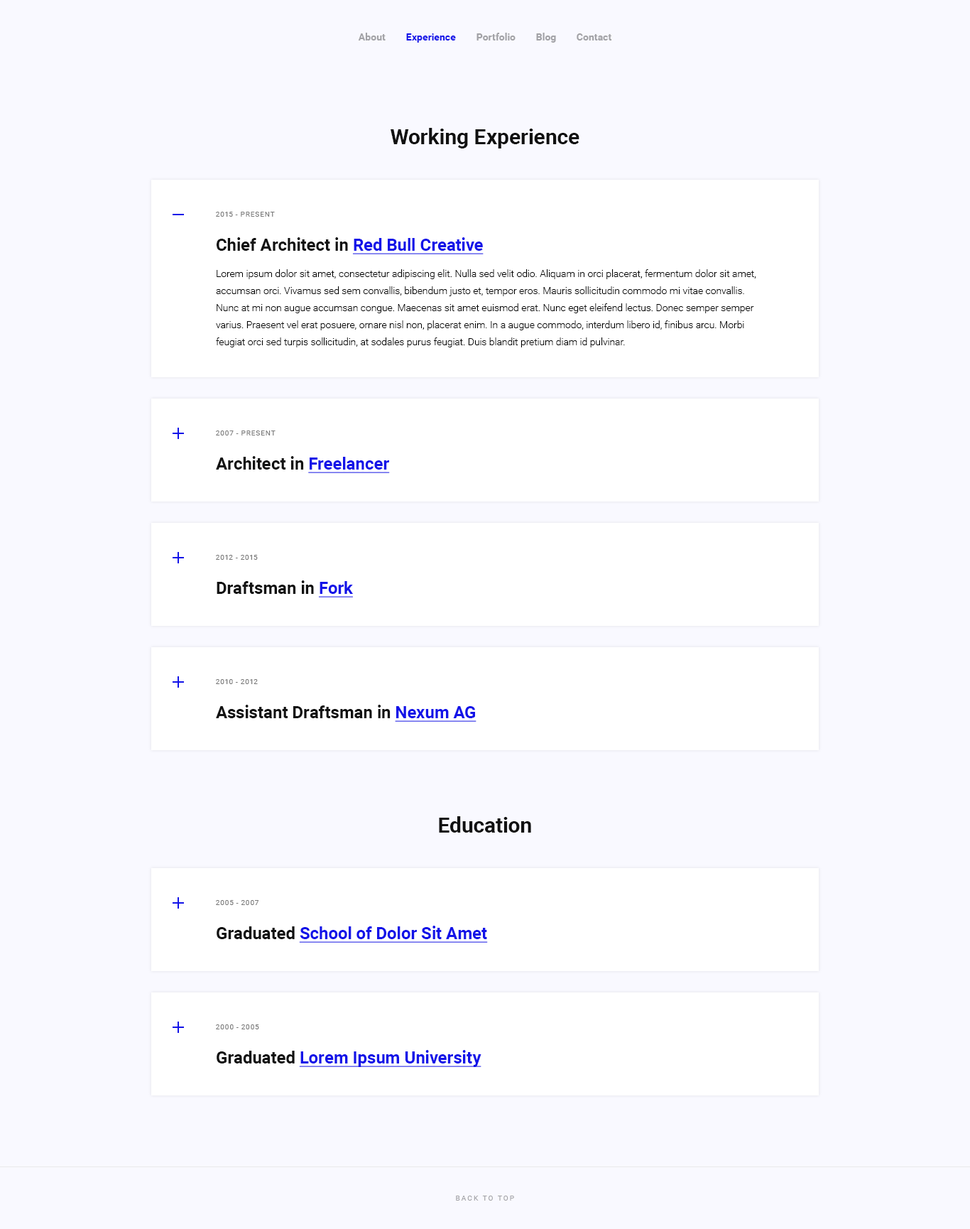
<style>
.page{position:relative;width:970px;height:1229px;background:#f9f9ff}
.page>*{position:absolute;margin:0}
.t1{font:9.9px "Roboto-Bold";color:#a2a2a6}
.t2{font:9.9px "Roboto-Bold";color:#1313e8}
.t3{font:21.3px "Roboto-Bold";color:#111111}
.t4{font:7.1px "Roboto-Regular";letter-spacing:0.075em;color:#797979;text-transform:uppercase}
.t5{font:17px "Roboto-Bold";color:#111111}
.t6{font:17px "Roboto-Bold";color:#1313e8;text-decoration:underline}
.t7{font:9.9px/17px "Roboto-Light";color:#000000}
.t8{font:7.1px "Roboto-Regular";letter-spacing:0.2em;color:#a2a2a6;text-transform:uppercase}
</style>
<div class="page">
<p class="t1" style="left:358px;top:33px;width:28px;height:7px">About</p>
<p class="t2" style="left:406px;top:33px;width:50px;height:10px">Experience</p>
<p class="t1" style="left:477px;top:33px;width:39px;height:7px">Portfolio</p>
<p class="t1" style="left:536px;top:33px;width:20px;height:10px">Blog</p>
<p class="t1" style="left:577px;top:33px;width:35px;height:7px">Contact</p>
<p class="t3" style="left:391px;top:128px;width:189px;height:20px">Working Experience</p>
<p class="t4" style="left:216px;top:212px;width:59px;height:5px">2015 - Present</p>
<p class="t5" style="left:217px;top:237px;width:267px;height:17px">Chief Architect in <span class="t6">Red Bull Creative</span></p>
<p class="t7" style="left:216px;top:269px;width:541px;height:78px">Lorem ipsum dolor sit amet, consectetur adipiscing elit. Nulla sed velit odio. Aliquam in orci placerat, fermentum dolor sit amet, accumsan orci. Vivamus sed sem convallis, bibendum justo et, tempor eros. Mauris sollicitudin commodo mi vitae convallis. Nunc at mi non augue accumsan congue. Maecenas sit amet euismod erat. Nunc eget eleifend lectus. Donec semper semper varius. Praesent vel erat posuere, ornare nisl non, placerat enim. In a augue commodo, interdum libero id, finibus arcu. Morbi feugiat orci sed turpis sollicitudin, at sodales purus feugiat. Duis blandit pretium diam id pulvinar.</p>
<p class="t4" style="left:216px;top:430px;width:60px;height:5px">2007 - Present</p>
<p class="t5" style="left:216px;top:456px;width:174px;height:17px">Architect in <span class="t6">Freelancer</span></p>
<p class="t4" style="left:216px;top:555px;width:42px;height:5px">2012 - 2015</p>
<p class="t5" style="left:217px;top:580px;width:137px;height:17px">Draftsman in <span class="t6">Fork</span></p>
<p class="t4" style="left:216px;top:679px;width:42px;height:5px">2010 - 2012</p>
<p class="t5" style="left:216px;top:705px;width:261px;height:17px">Assistant Draftsman in <span class="t6">Nexum AG</span></p>
<p class="t3" style="left:439px;top:816px;width:92px;height:17px">Education</p>
<p class="t4" style="left:216px;top:900px;width:43px;height:5px">2005 - 2007</p>
<p class="t6" style="left:217px;top:926px;width:271px;height:17px"><span class="t5">Graduated </span>School of Dolor Sit Amet</p>
<p class="t4" style="left:216px;top:1024px;width:43px;height:5px">2000 - 2005</p>
<p class="t6" style="left:217px;top:1050px;width:265px;height:17px"><span class="t5">Graduated </span>Lorem Ipsum University</p>
<p class="t8" style="left:456px;top:1196px;width:58px;height:4px">back to top</p>
</div>
